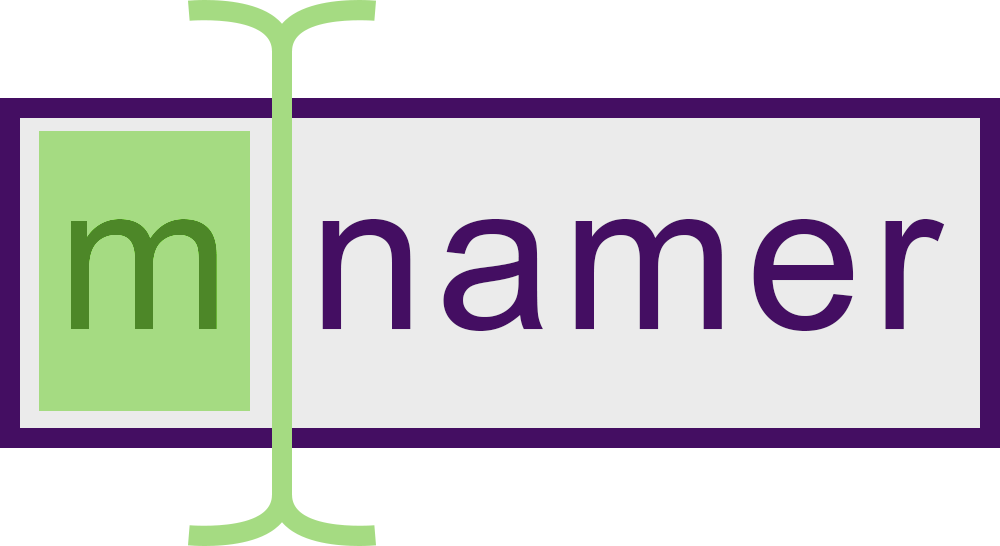
<style>
.page{position:relative;width:1000px;height:546px;background:#ebebeb}
.page>*{position:absolute;margin:0}
.t1{font:208.3px "ArialMT";letter-spacing:0.05em;color:#440e62}
</style>
<div class="page">
<p class="t1" style="left:70px;top:219px;width:875px;height:112px">m namer</p>
</div>
